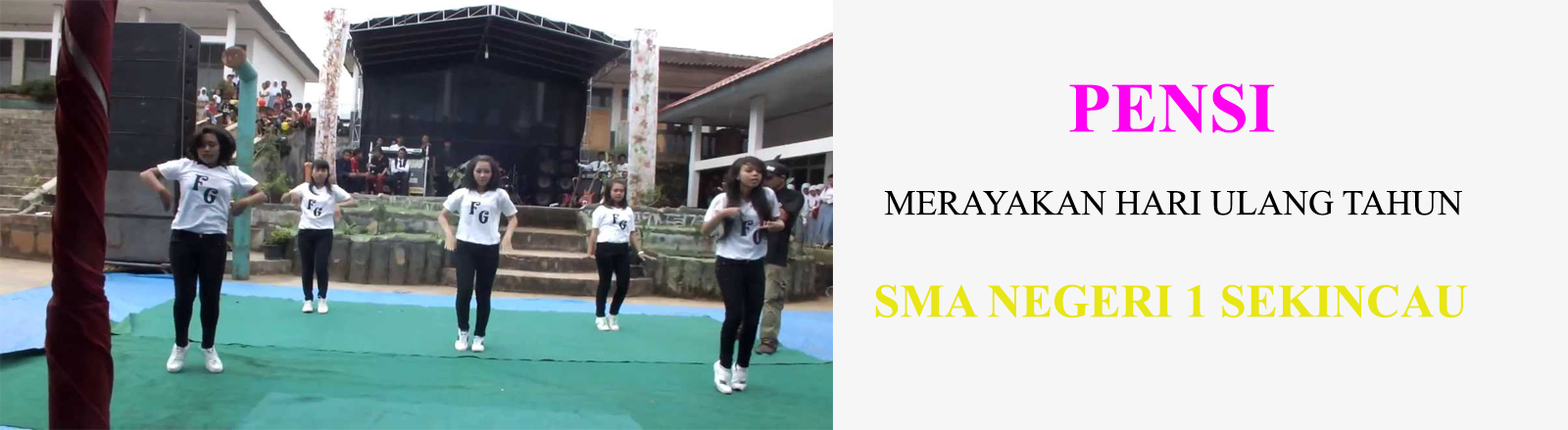
<style>
.page{position:relative;width:1568px;height:430px;background:#f6f6f6}
.page>*{position:absolute;margin:0}
.t1{font:70.6px "TimesNewRomanPS-BoldMT";color:#ff00f0}
.t2{font:35.3px "TimesNewRomanPSMT";color:#000000}
.t3{font:47px "TimesNewRomanPS-BoldMT";color:#e8e613}
</style>
<div class="page">
<p class="t1" style="left:1069px;top:83px;width:206px;height:50px">PENSI</p>
<p class="t2" style="left:884px;top:190px;width:578px;height:26px">MERAYAKAN HARI ULANG TAHUN</p>
<p class="t3" style="left:875px;top:284px;width:593px;height:34px">SMA NEGERI 1 SEKINCAU</p>
</div>
